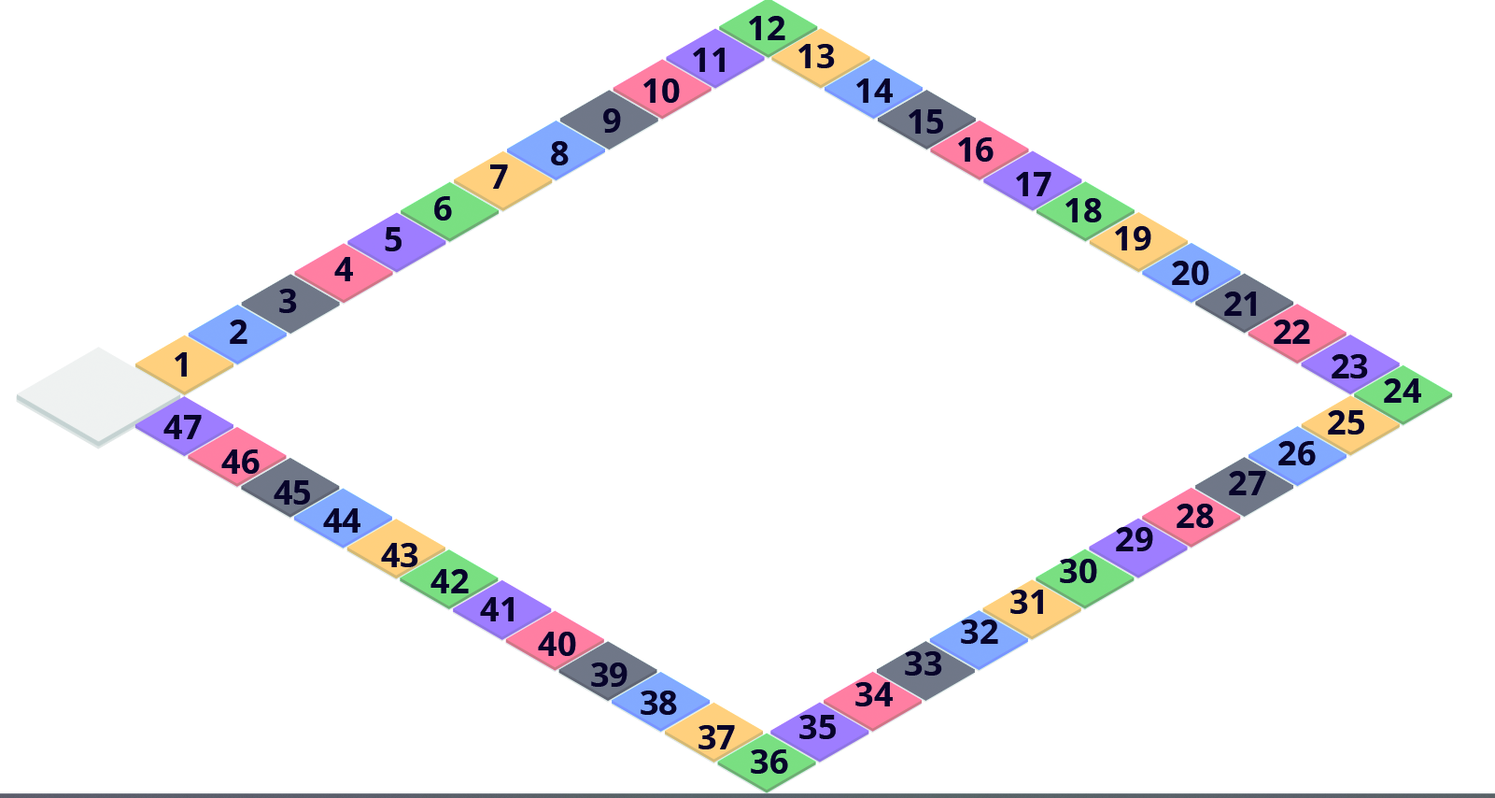
<style>
.page{position:relative;width:1495px;height:798px;background:#ffffff}
.page>*{position:absolute;margin:0}
.t1{font:33.6px "OpenSans-Bold";color:#08032b}
</style>
<div class="page">
<p class="t1" style="left:749px;top:16px;width:36px;height:24px">12</p>
<p class="t1" style="left:693px;top:48px;width:32px;height:24px">11</p>
<p class="t1" style="left:798px;top:44px;width:37px;height:24px">13</p>
<p class="t1" style="left:643px;top:78px;width:37px;height:25px">10</p>
<p class="t1" style="left:856px;top:78px;width:37px;height:25px">14</p>
<p class="t1" style="left:603px;top:108px;width:18px;height:25px">9</p>
<p class="t1" style="left:909px;top:109px;width:34px;height:25px">15</p>
<p class="t1" style="left:958px;top:137px;width:36px;height:25px">16</p>
<p class="t1" style="left:551px;top:141px;width:18px;height:24px">8</p>
<p class="t1" style="left:490px;top:164px;width:18px;height:25px">7</p>
<p class="t1" style="left:1016px;top:172px;width:36px;height:24px">17</p>
<p class="t1" style="left:434px;top:196px;width:18px;height:24px">6</p>
<p class="t1" style="left:1066px;top:198px;width:36px;height:24px">18</p>
<p class="t1" style="left:385px;top:227px;width:17px;height:24px">5</p>
<p class="t1" style="left:1115px;top:226px;width:36px;height:24px">19</p>
<p class="t1" style="left:334px;top:257px;width:19px;height:24px">4</p>
<p class="t1" style="left:1172px;top:261px;width:37px;height:24px">20</p>
<p class="t1" style="left:279px;top:289px;width:18px;height:24px">3</p>
<p class="t1" style="left:1224px;top:291px;width:32px;height:25px">21</p>
<p class="t1" style="left:230px;top:319px;width:17px;height:25px">2</p>
<p class="t1" style="left:1274px;top:319px;width:36px;height:25px">22</p>
<p class="t1" style="left:175px;top:352px;width:12px;height:24px">1</p>
<p class="t1" style="left:1332px;top:354px;width:36px;height:24px">23</p>
<p class="t1" style="left:1384px;top:378px;width:37px;height:25px">24</p>
<p class="t1" style="left:1328px;top:410px;width:36px;height:24px">25</p>
<p class="t1" style="left:163px;top:415px;width:39px;height:24px">47</p>
<p class="t1" style="left:221px;top:449px;width:39px;height:24px">46</p>
<p class="t1" style="left:1278px;top:441px;width:38px;height:24px">26</p>
<p class="t1" style="left:1229px;top:471px;width:37px;height:24px">27</p>
<p class="t1" style="left:274px;top:480px;width:36px;height:24px">45</p>
<p class="t1" style="left:323px;top:508px;width:37px;height:24px">44</p>
<p class="t1" style="left:1177px;top:503px;width:37px;height:25px">28</p>
<p class="t1" style="left:1116px;top:527px;width:37px;height:24px">29</p>
<p class="t1" style="left:381px;top:543px;width:37px;height:24px">43</p>
<p class="t1" style="left:431px;top:569px;width:38px;height:24px">42</p>
<p class="t1" style="left:1060px;top:558px;width:37px;height:25px">30</p>
<p class="t1" style="left:1010px;top:589px;width:33px;height:25px">31</p>
<p class="t1" style="left:480px;top:597px;width:34px;height:24px">41</p>
<p class="t1" style="left:961px;top:619px;width:37px;height:24px">32</p>
<p class="t1" style="left:538px;top:631px;width:38px;height:25px">40</p>
<p class="t1" style="left:905px;top:651px;width:37px;height:24px">33</p>
<p class="t1" style="left:591px;top:662px;width:37px;height:24px">39</p>
<p class="t1" style="left:855px;top:682px;width:38px;height:24px">34</p>
<p class="t1" style="left:641px;top:690px;width:36px;height:24px">38</p>
<p class="t1" style="left:699px;top:725px;width:36px;height:24px">37</p>
<p class="t1" style="left:799px;top:714px;width:37px;height:25px">35</p>
<p class="t1" style="left:751px;top:749px;width:37px;height:24px">36</p>
</div>
